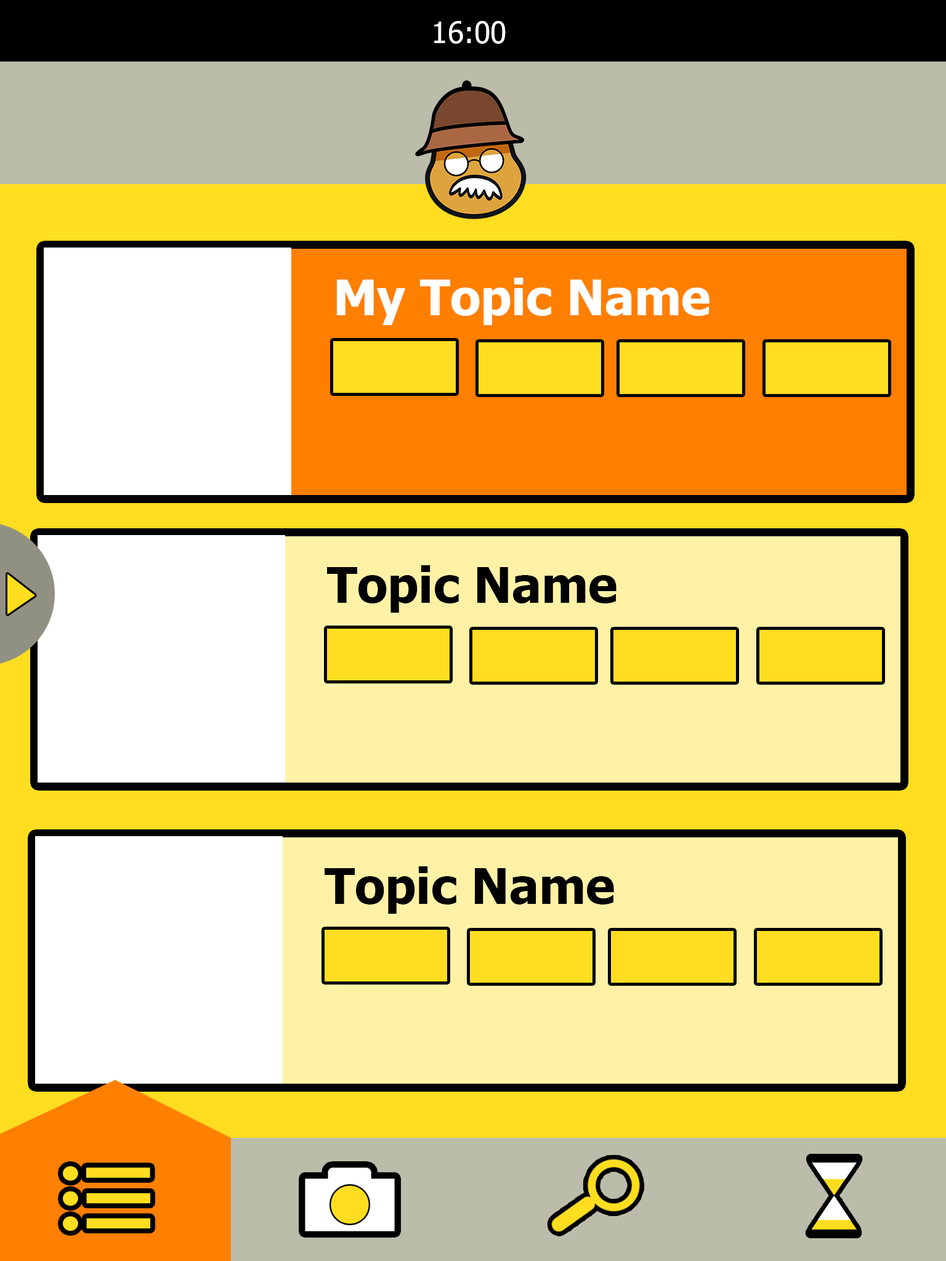
<style>
.page{position:relative;width:946px;height:1261px;background:#ffdd20}
.page>*{position:absolute;margin:0}
.t1{font:29.6px "Tahoma";color:#ffffff}
.t2{font:49.3px "Tahoma-Bold";color:#ffffff}
.t3{font:49.3px "Tahoma-Bold";color:#000000}
</style>
<div class="page">
<p class="t1" style="left:434px;top:21px;width:71px;height:23px">16:00</p>
<p class="t2" style="left:337px;top:278px;width:372px;height:47px">My Topic Name</p>
<p class="t3" style="left:327px;top:565px;width:289px;height:48px">Topic Name</p>
<p class="t3" style="left:324px;top:866px;width:290px;height:48px">Topic Name</p>
</div>
